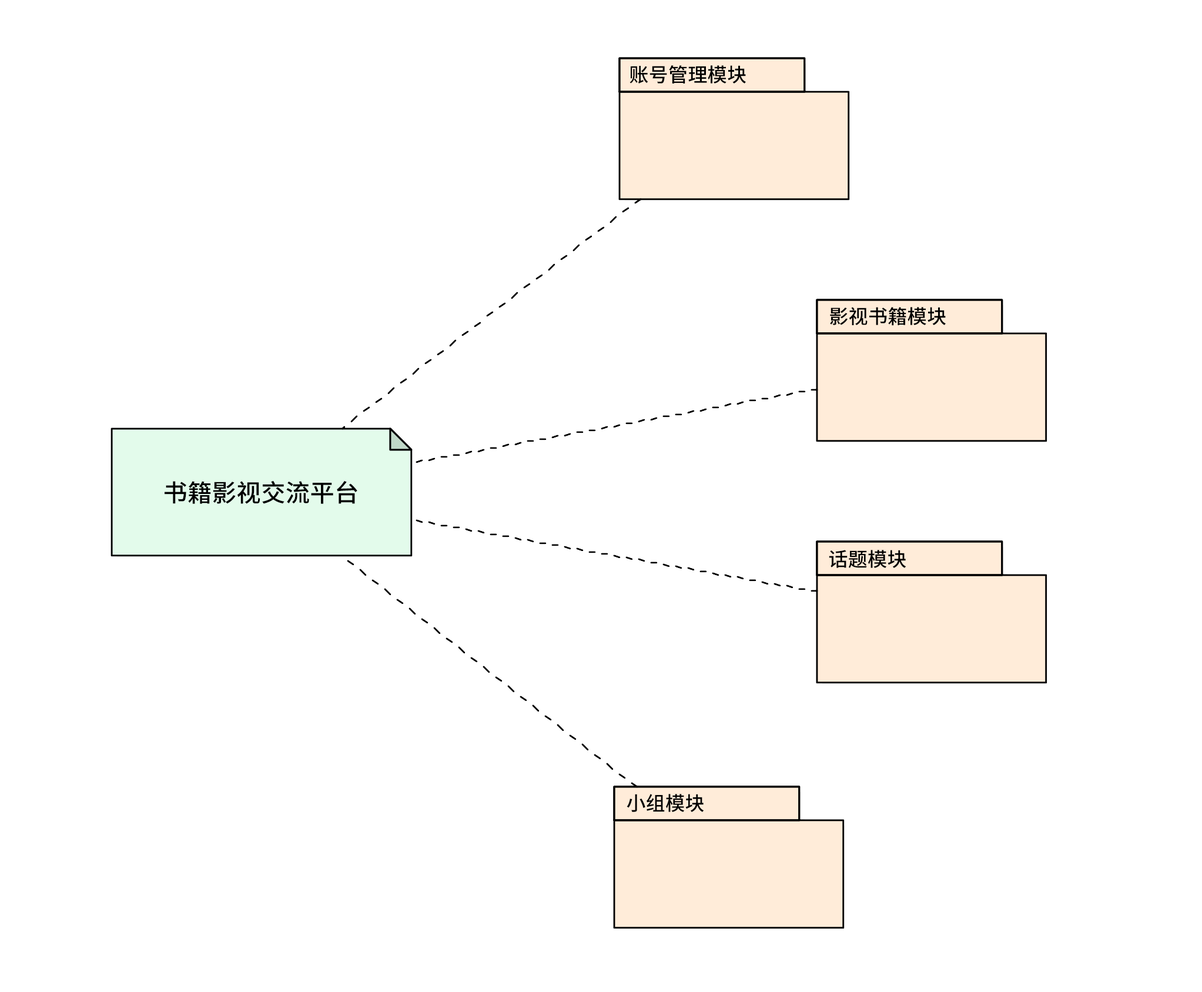
<style>
.page{position:relative;width:1202px;height:992px;background:#ffffff}
.page>*{position:absolute;margin:0}
.t1{font:19.6px "SourceHanSansSC-Medium";color:#000000}
.t2{font:24.5px "SourceHanSansSC-Medium";color:#000000}
</style>
<div class="page">
<p class="t1" style="left:630px;top:65px;width:116px;height:18px">账号管理模块</p>
<p class="t1" style="left:830px;top:307px;width:116px;height:19px">影视书籍模块</p>
<p class="t2" style="left:165px;top:480px;width:192px;height:24px">书籍影视交流平台</p>
<p class="t1" style="left:829px;top:550px;width:78px;height:18px">话题模块</p>
<p class="t1" style="left:627px;top:794px;width:77px;height:18px">小组模块</p>
</div>
